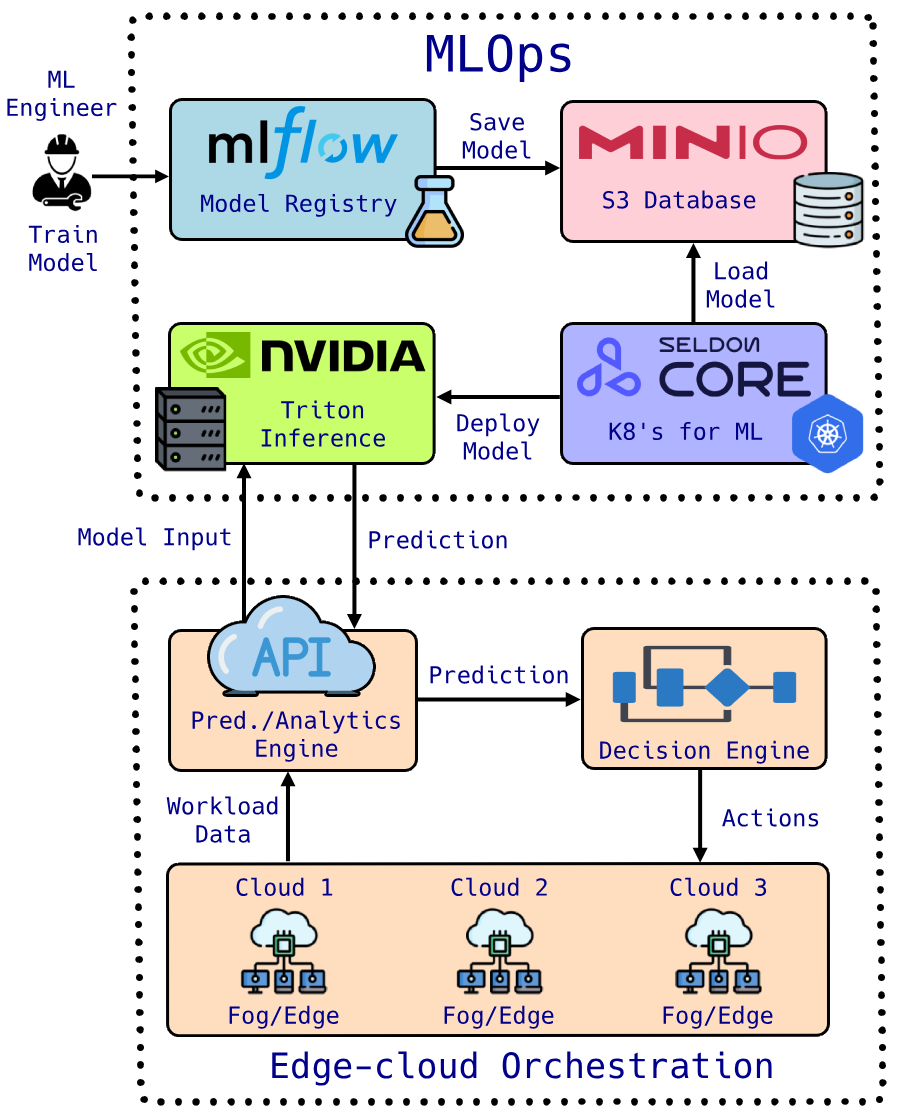
<style>
.page{position:relative;width:911px;height:1119px;background:#ffffff}
.page>*{position:absolute;margin:0}
.t1{font:50px "Hack-Regular";color:#00008b}
.t2{font:23.4px "Hack-Regular";color:#00008b}
.t3{font:23.4px "Hack-Regular";color:#ffffff}
.t4{font:35px "Hack-Regular";color:#00008b}
</style>
<div class="page">
<p class="t1" style="left:426px;top:34px;width:145px;height:48px">MLOps</p>
<p class="t2" style="left:7px;top:70px;width:110px;height:51px;text-align:center">ML<br>Engineer</p>
<p class="t2" style="left:462px;top:112px;width:69px;height:47px;text-align:center">Save<br>Model</p>
<p class="t2" style="left:201px;top:193px;width:196px;height:24px">Model Registry</p>
<p class="t2" style="left:603px;top:190px;width:153px;height:19px">S3 Database</p>
<p class="t2" style="left:28px;top:225px;width:69px;height:47px;text-align:center">Train<br>Model</p>
<p class="t2" style="left:706px;top:261px;width:69px;height:47px;text-align:center">Load<br>Model</p>
<p class="t2" style="left:261px;top:400px;width:124px;height:47px;text-align:center"><span class="t3">T</span>riton <br>Inference</p>
<p class="t2" style="left:457px;top:413px;width:83px;height:47px;text-align:center">Deploy<br>Model</p>
<p class="t2" style="left:609px;top:421px;width:154px;height:20px">K8's for ML</p>
<p class="t2" style="left:78px;top:527px;width:153px;height:24px">Model Input</p>
<p class="t2" style="left:369px;top:530px;width:138px;height:19px">Prediction</p>
<p class="t2" style="left:430px;top:665px;width:138px;height:19px">Prediction</p>
<p class="t2" style="left:192px;top:710px;width:208px;height:52px;text-align:center">Pred./Analytics<br>Engine</p>
<p class="t2" style="left:600px;top:740px;width:209px;height:24px">Decision Engine</p>
<p class="t2" style="left:166px;top:796px;width:112px;height:47px;text-align:center">Workload<br>Data</p>
<p class="t2" style="left:722px;top:808px;width:97px;height:19px">Actions</p>
<p class="t2" style="left:236px;top:877px;width:97px;height:19px">Cloud 1</p>
<p class="t2" style="left:451px;top:877px;width:96px;height:19px">Cloud 2</p>
<p class="t2" style="left:670px;top:877px;width:97px;height:19px">Cloud 3</p>
<p class="t2" style="left:229px;top:1005px;width:110px;height:24px">Fog/Edge</p>
<p class="t2" style="left:444px;top:1005px;width:110px;height:24px">Fog/Edge</p>
<p class="t2" style="left:663px;top:1005px;width:110px;height:24px">Fog/Edge</p>
<p class="t4" style="left:272px;top:1051px;width:500px;height:35px">Edge-cloud Orchestration</p>
</div>
